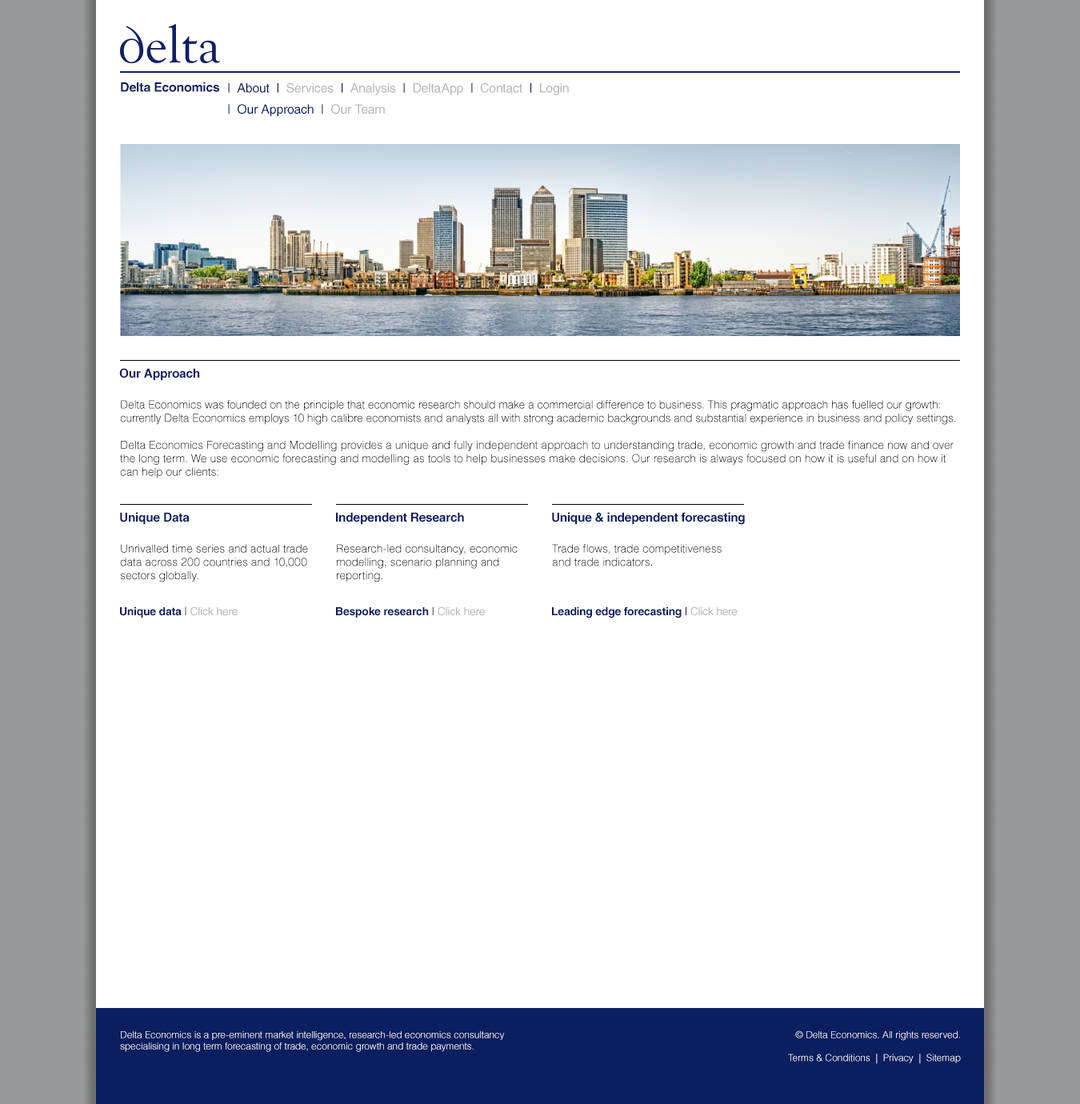
<style>
.page{position:relative;width:1080px;height:1104px;background:#ffffff}
.page>*{position:absolute;margin:0}
.t1{font:12.8px "HelveticaLTStd-Bold";letter-spacing:-0.015em;color:#0b1e60}
.t2{font:12.8px "HelveticaLTStd-Roman";letter-spacing:-0.015em;color:#0b1e60}
.t3{font:12.8px "HelveticaLTStd-Roman";letter-spacing:-0.015em;color:#b7b7b7}
.t4{font:12.4px "HelveticaLTStd-Bold";letter-spacing:-0.015em;color:#0b1e60}
.t5{font:11.2px "HelveticaLTStd-Light";color:#000000}
.t6{font:11.2px "HelveticaLTStd-Light";letter-spacing:-0.01em;color:#000000}
.t7{font:12.4px "HelveticaLTStd-Bold";letter-spacing:-0.018em;color:#0b1e60}
.t8{font:11.2px "HelveticaLTStd-Bold";letter-spacing:-0.015em;color:#0b1e60}
.t9{font:11.2px "HelveticaLTStd-Roman";letter-spacing:-0.015em;color:#0b1e60}
.t10{font:11.2px "HelveticaLTStd-Roman";letter-spacing:-0.015em;color:#b7b7b7}
.t11{font:11.2px "HelveticaLTStd-Bold";letter-spacing:-0.018em;color:#0b1e60}
.t12{font:11.2px "HelveticaLTStd-Roman";letter-spacing:-0.018em;color:#0b1e60}
.t13{font:11.2px "HelveticaLTStd-Roman";letter-spacing:-0.018em;color:#b7b7b7}
.t14{font:9.6px "HelveticaLTStd-Light";color:#ffffff}
</style>
<div class="page">
<p class="t1" style="left:121px;top:82px;width:99px;height:10px">Delta Economics</p>
<p class="t2" style="left:228px;top:82px;width:341px;height:13px">|  About  |  <span class="t3">Services  </span>|  <span class="t3">Analysis  </span>|  <span class="t3">DeltaApp  </span>|  <span class="t3">Contact  </span>|  <span class="t3">Login</span></p>
<p class="t2" style="left:228px;top:104px;width:157px;height:13px">|  Our Approach  |  <span class="t3">Our Team</span></p>
<p class="t4" style="left:119px;top:368px;width:81px;height:13px">Our Approach</p>
<p class="t5" style="left:120px;top:400px;width:836px;height:78px"><span class="t6">Delta Economics was founded on the principle that economic research should make a commercial difference to business. This pragmatic approach has fuelled our growth: currently Delta Economics employs 10 high calibre economists and analysts all with strong academic backgrounds and substantial experience in business and policy settings.<br></span><br>Delta Economics Forecasting and Modelling provides a unique and fully independent approach to understanding trade, economic growth and trade finance now and over the long term. We use economic forecasting and modelling as tools to help businesses make decisions. Our research is always focused on how it is useful and on how it can help our clients:</p>
<p class="t4" style="left:120px;top:512px;width:70px;height:13px">Unique Data</p>
<p class="t4" style="left:336px;top:512px;width:128px;height:13px">Independent Research</p>
<p class="t7" style="left:552px;top:512px;width:193px;height:13px">Unique &amp; independent forecasting</p>
<p class="t5" style="left:120px;top:544px;width:188px;height:38px">Unrivalled time series and actual trade data across 200 countries and 10,000 sectors globally.</p>
<p class="t5" style="left:337px;top:544px;width:181px;height:38px">Research-led consultancy, economic modelling, scenario planning and reporting.</p>
<p class="t5" style="left:552px;top:544px;width:170px;height:22px">Trade flows, trade competitiveness and trade indicators.</p>
<p class="t8" style="left:120px;top:606px;width:118px;height:12px">Unique data<span class="t9"> | </span><span class="t10">Click here</span></p>
<p class="t8" style="left:336px;top:606px;width:149px;height:12px">Bespoke research<span class="t9"> | </span><span class="t10">Click here</span></p>
<p class="t11" style="left:552px;top:606px;width:186px;height:12px">Leading edge forecasting<span class="t12"> | </span><span class="t13">Click here</span></p>
<p class="t14" style="left:120px;top:1031px;width:385px;height:21px">Delta Economics is a pre-eminent market intelligence, research-led economics consultancy<br>specialising in long term forecasting of trade, economic growth and trade payments.</p>
<p class="t14" style="left:788px;top:1030px;width:173px;height:34px;text-align:right">© Delta Economics. All rights reserved.<br><br>Terms &amp; Conditions  |  Privacy  |  Sitemap</p>
</div>
